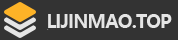
<style>
.page{position:relative;width:178px;height:40px;background:#333333}
.page>*{position:absolute;margin:0}
.t1{font:18px "MicrosoftYaHei-Bold";letter-spacing:-0.05em;color:#e5e5e5;text-transform:uppercase}
</style>
<div class="page">
<p class="t1" style="left:48px;top:14px;width:124px;height:14px">lijinmao.top</p>
</div>
